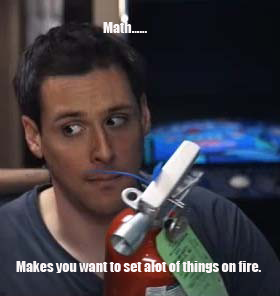
<style>
.page{position:relative;width:280px;height:296px}
.page>*{position:absolute;margin:0}
.t1{font:14px "Impact";color:#f8f3f4}
</style>
<div class="page">
<p class="t1" style="left:103px;top:22px;width:44px;height:11px">Math......</p>
<p class="t1" style="left:16px;top:261px;width:245px;height:12px">Makes you want to set alot of things on fire.</p>
</div>
